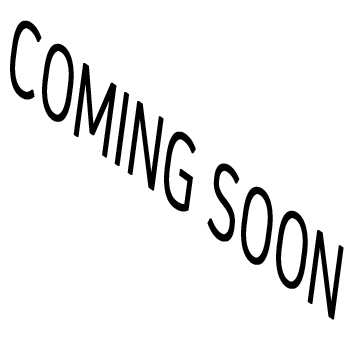
<style>
.page{position:relative;width:350px;height:350px;background:#ffffff}
.page>*{position:absolute;margin:0}
.t1{font:100.2px "NanumSquareR";color:#000000;font-weight:bold;scale:0.59 1}
</style>
<div class="page">
<p class="t1" style="left:10px;top:20px;width:334px;height:300px;rotate:36deg">COMING SOON</p>
</div>
